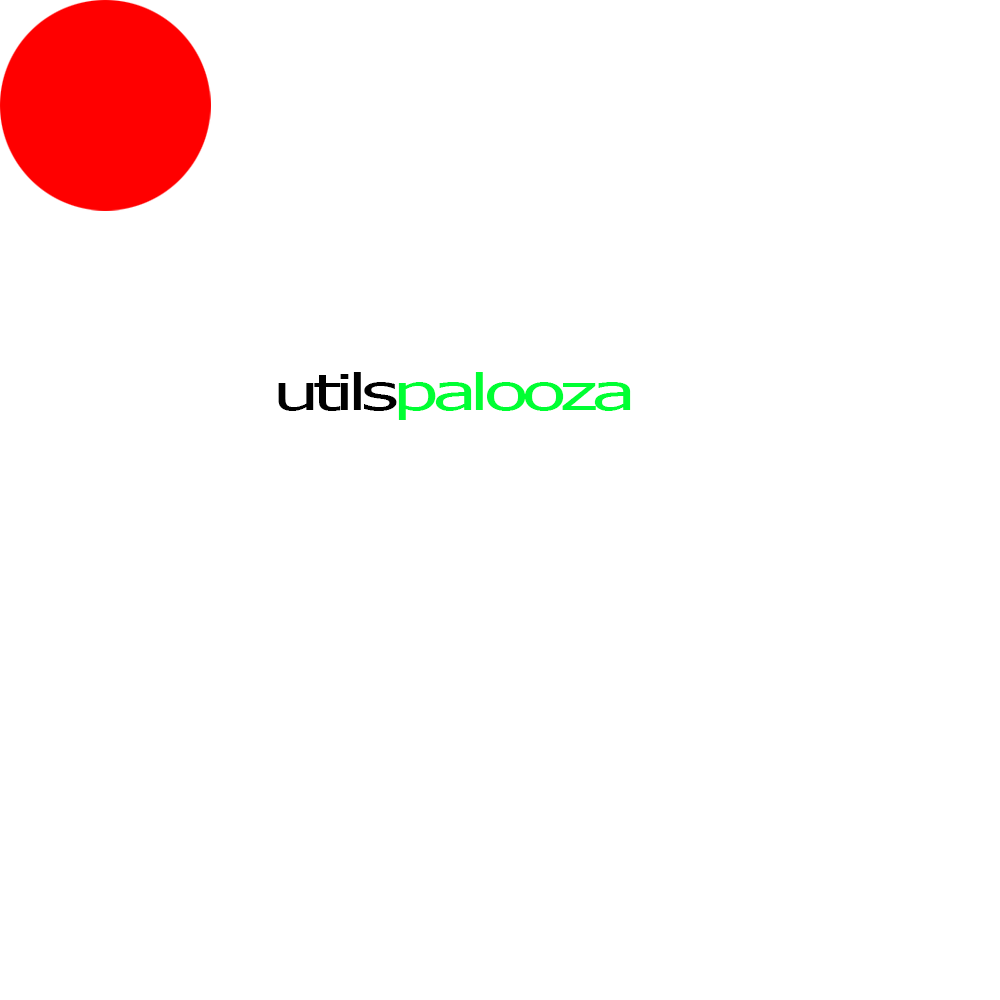
<style>
.page{position:relative;width:1000px;height:1000px;background:#ffffff}
.page>*{position:absolute;margin:0}
.t1{font:50px "Verdana";letter-spacing:-0.1em;color:#00ff33;scale:1.51 1}
.t2{font:50px "Verdana";letter-spacing:-0.1em;color:#000000;scale:1.51 1}
</style>
<div class="page">
<p class="t1" style="left:278px;top:372px;width:353px;height:48px"><span class="t2">utils</span>palooza</p>
</div>
